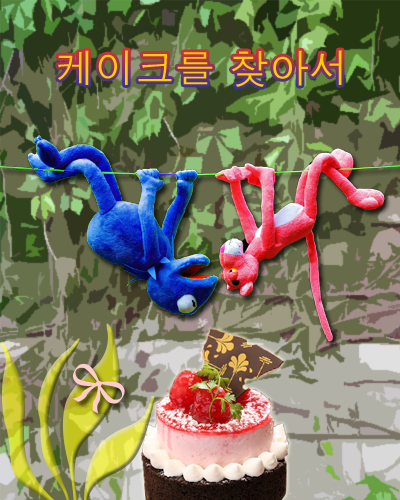
<style>
.page{position:relative;width:400px;height:500px}
.page>*{position:absolute;margin:0}
.t1{font:40px "Dotum";color:#ffcc00}
</style>
<div class="page">
<p class="t1" style="left:58px;top:50px;width:284px;height:37px">케이크를 찾아서</p>
</div>
